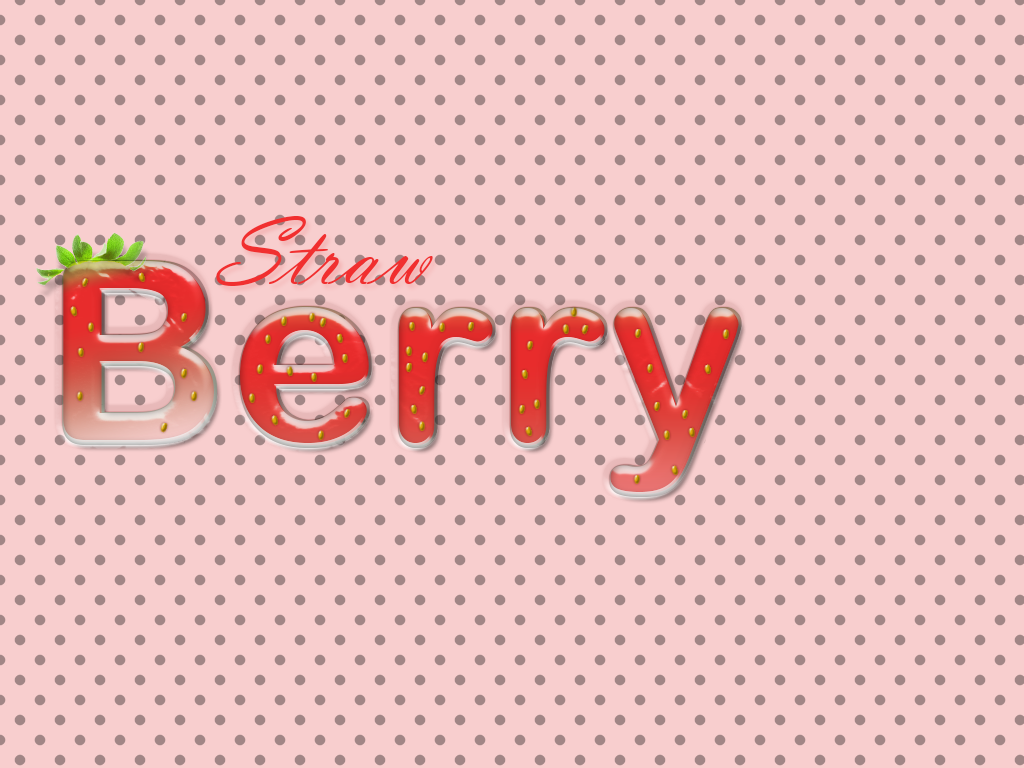
<style>
.page{position:relative;width:1024px;height:768px;background:#f8cece}
.page>*{position:absolute;margin:0}
.t1{font:100px "VladimirScript";letter-spacing:0.02em;color:#f12f2f}
.t2{font:250px "ArialRoundedMTBold";letter-spacing:0.02em}
</style>
<div class="page">
<p class="t1" style="left:216px;top:216px;width:217px;height:70px">Straw</p>
<p class="t2" style="left:63px;top:261px;width:674px;height:231px">Berry</p>
<p class="t2" style="left:63px;top:261px;width:674px;height:231px">Berry</p>
<p class="t2" style="left:65px;top:263px;width:674px;height:231px">Berry</p>
</div>
